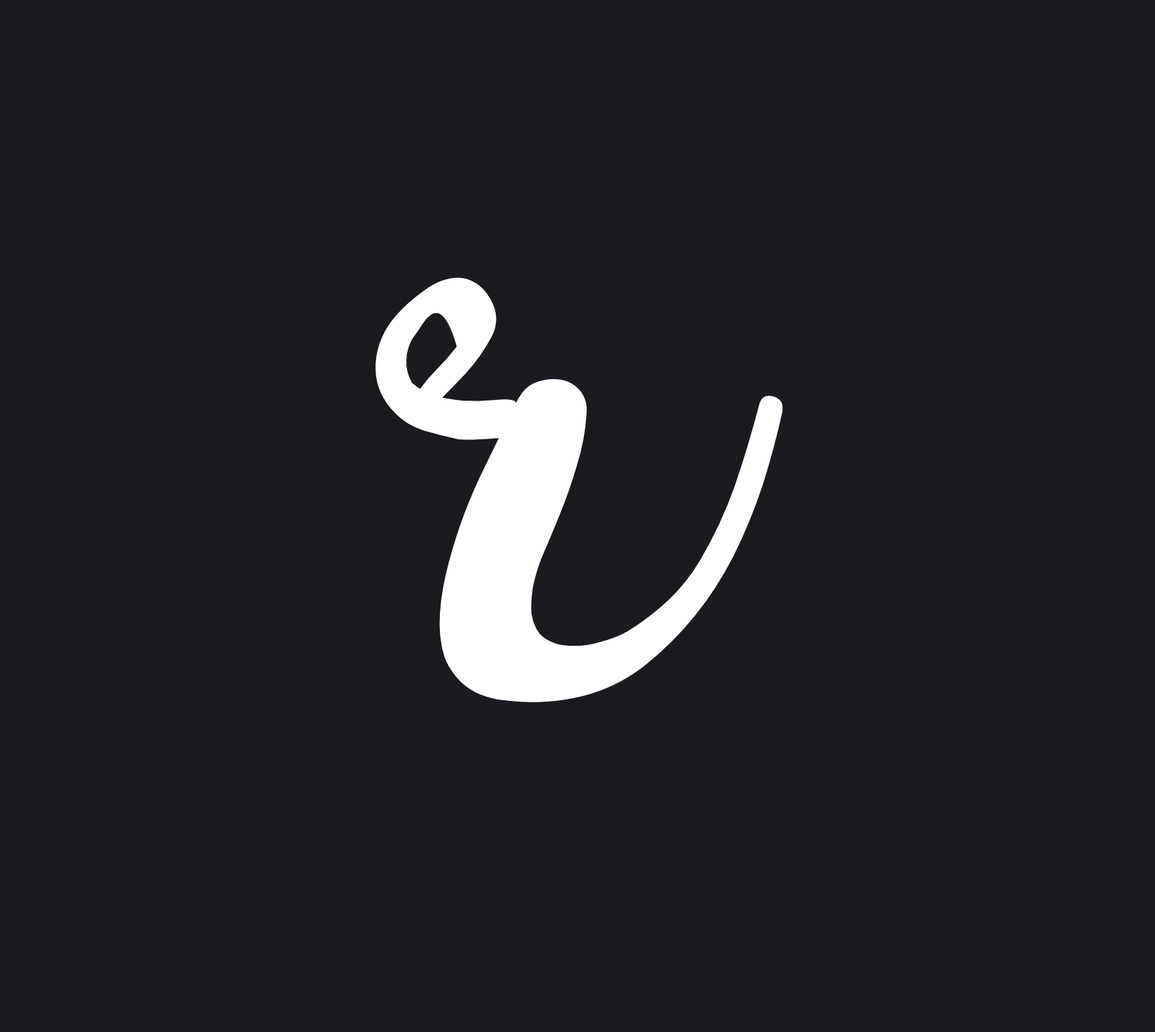
<style>
.page{position:relative;width:1155px;height:1032px;background:#1a1a21}
.page>*{position:absolute;margin:0}
.t1{font:573.4px "Digory_Doodles_PS";color:#ffffff}
</style>
<div class="page">
<p class="t1" style="left:376px;top:277px;width:407px;height:425px">r</p>
</div>
